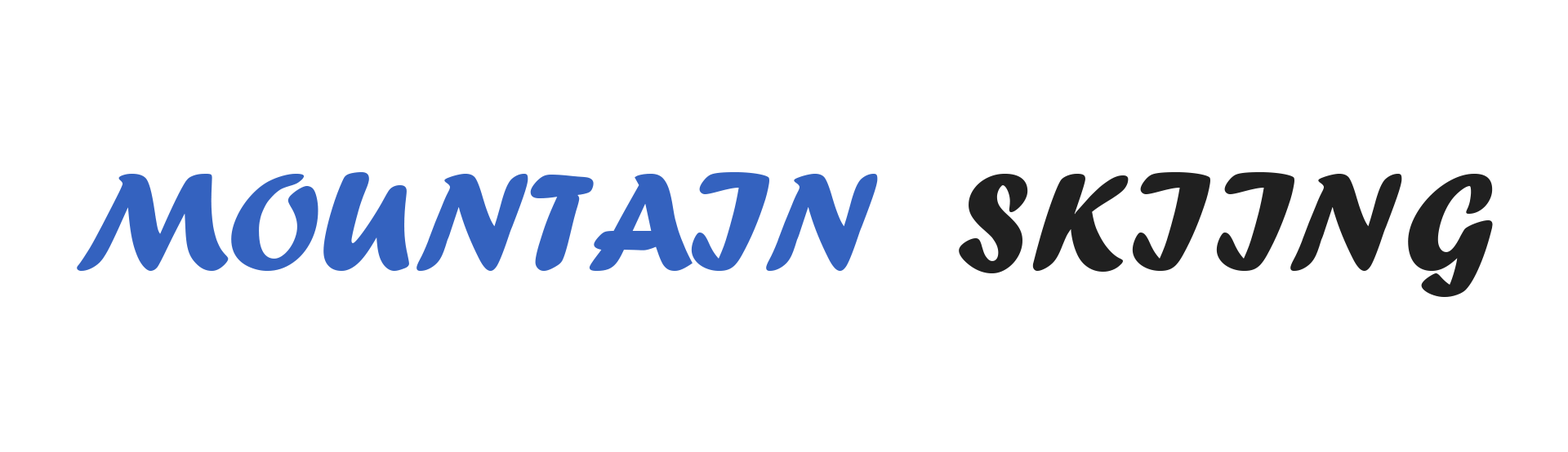
<style>
.page{position:relative;width:1568px;height:452px;background:#ffffff}
.page>*{position:absolute;margin:0}
.t1{font:144.9px "ForteMT";color:#3462bf}
.t2{font:144.9px "ForteMT";color:#202020}
</style>
<div class="page">
<p class="t1" style="left:77px;top:172px;width:1416px;height:125px">MOUNTAIN  <span class="t2">SKIING</span></p>
</div>
